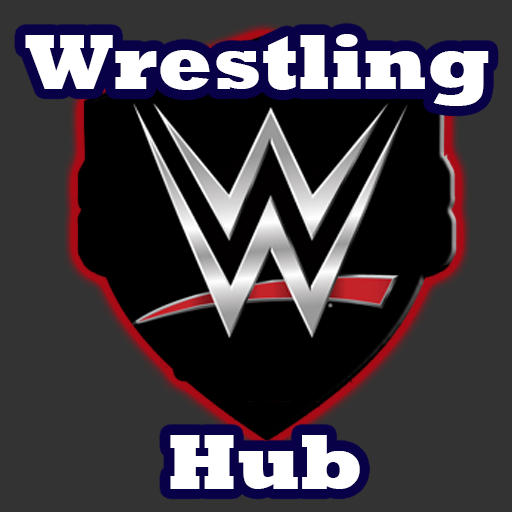
<style>
.page{position:relative;width:512px;height:512px;background:#333333}
.page>*{position:absolute;margin:0}
.t1{font:80px "Rockwell-ExtraBold";color:#ffffff}
</style>
<div class="page">
<p class="t1" style="left:25px;top:34px;width:464px;height:72px">Wrestling</p>
<p class="t1" style="left:170px;top:435px;width:190px;height:54px">Hub</p>
</div>
